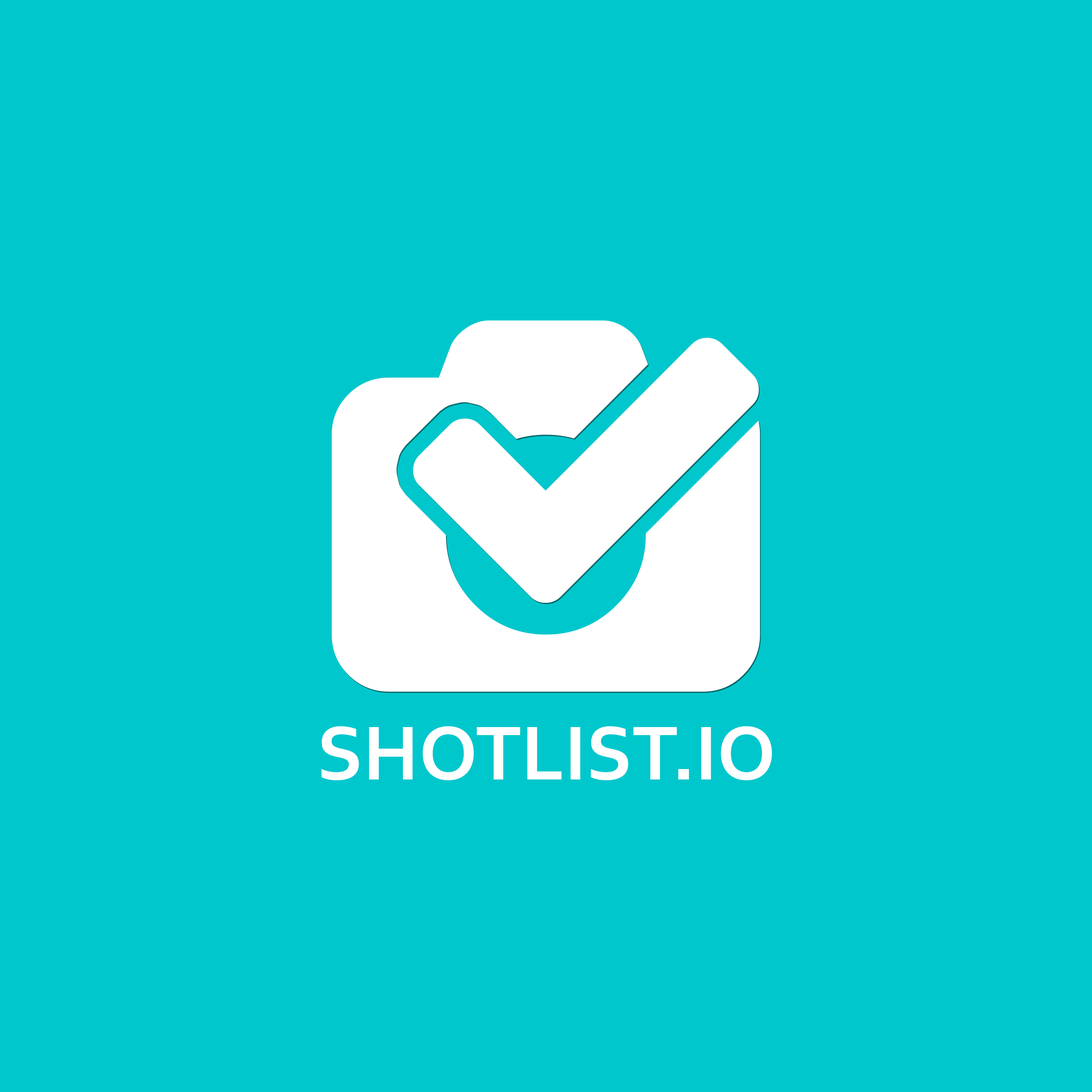
<style>
.page{position:relative;width:1092px;height:1092px;background:#00c7cc}
.page>*{position:absolute;margin:0}
.t1{font:79.9px "Corbel-Bold";color:#ffffff}
</style>
<div class="page">
<p class="t1" style="left:321px;top:726px;width:451px;height:54px">SHOTLIST.IO</p>
</div>
